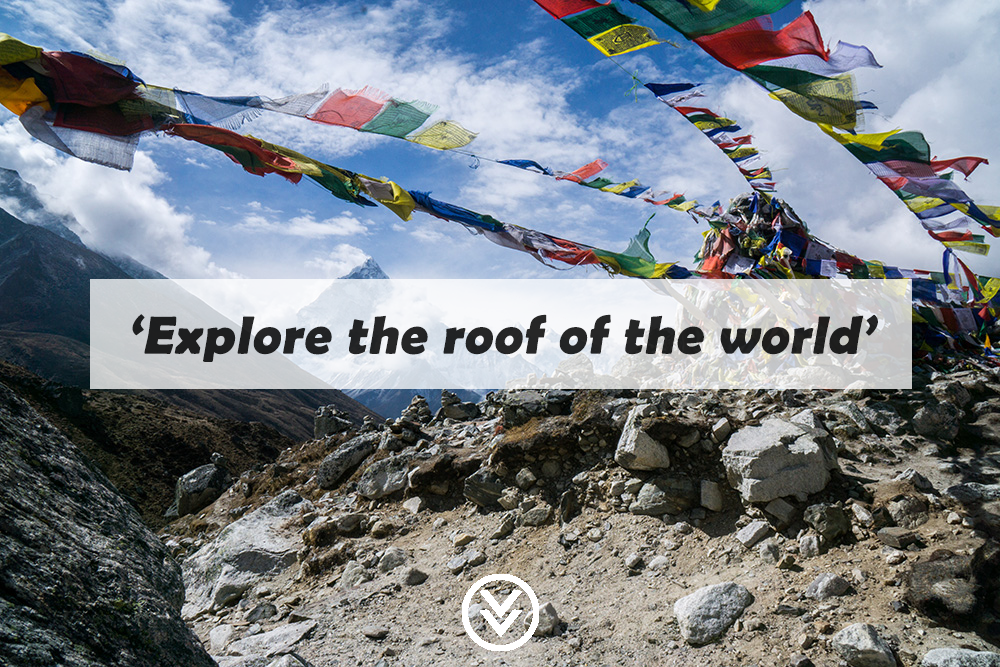
<style>
.page{position:relative;width:1000px;height:667px}
.page>*{position:absolute;margin:0}
.t1{font:53.3px "BerlinSansFBDemi-Bold";color:#212224;font-weight:bold;font-style:italic}
</style>
<div class="page">
<p class="t1" style="left:132px;top:314px;width:746px;height:48px">‘Explore the roof of the world’</p>
</div>
